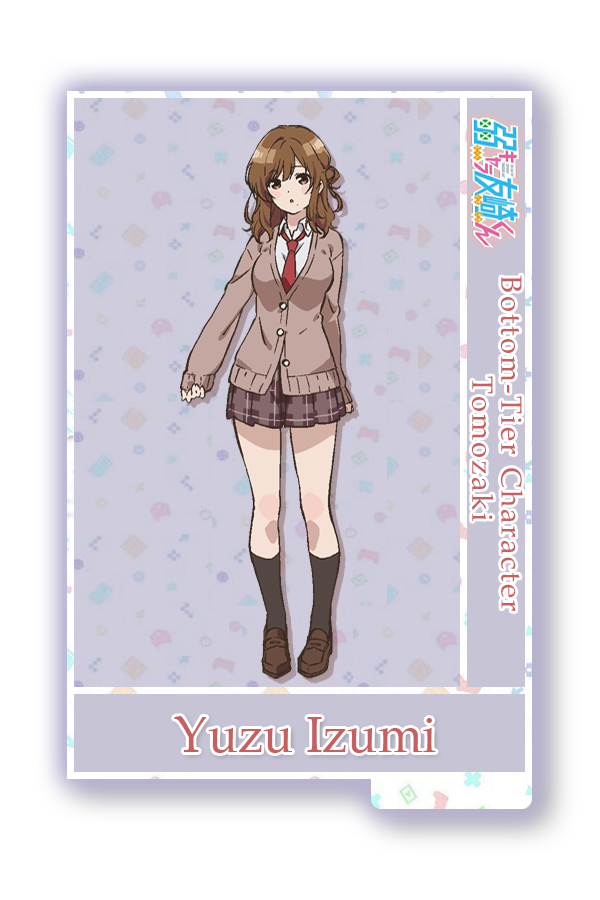
<style>
.page{position:relative;width:600px;height:900px;background:#ffffff}
.page>*{position:absolute;margin:0}
.t1{font:29.2px/29.2px "BookAntiqua";letter-spacing:0.08em;color:#c65f5d}
.t2{font:50px "BookAntiqua";color:#c65f5d}
</style>
<div class="page">
<p class="t1" style="left:471px;top:275px;width:52px;height:336px;text-align:center;rotate:90deg">Bottom-Tier Character <br>Tomozaki</p>
<p class="t2" style="left:174px;top:716px;width:262px;height:37px">Yuzu Izumi</p>
</div>
